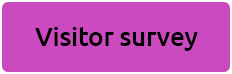
<style>
.page{position:relative;width:232px;height:74px;background:#cb4ac0}
.page>*{position:absolute;margin:0}
.t1{font:26px "Ubuntu-Medium";letter-spacing:-0.01em;color:#000000}
</style>
<div class="page">
<p class="t1" style="left:35px;top:27px;width:163px;height:24px">Visitor survey</p>
</div>
